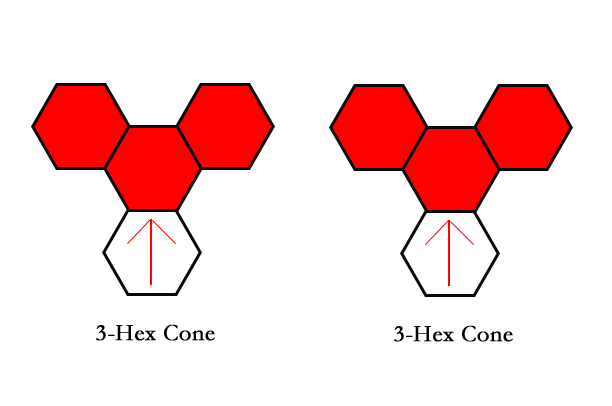
<style>
.page{position:relative;width:612px;height:406px;background:#ffffff}
.page>*{position:absolute;margin:0}
.t1{font:24px "Garamond";color:#000000;font-weight:bold}
</style>
<div class="page">
<p class="t1" style="left:96px;top:324px;width:119px;height:17px">3-Hex Cone</p>
<p class="t1" style="left:394px;top:325px;width:119px;height:17px">3-Hex Cone</p>
</div>
